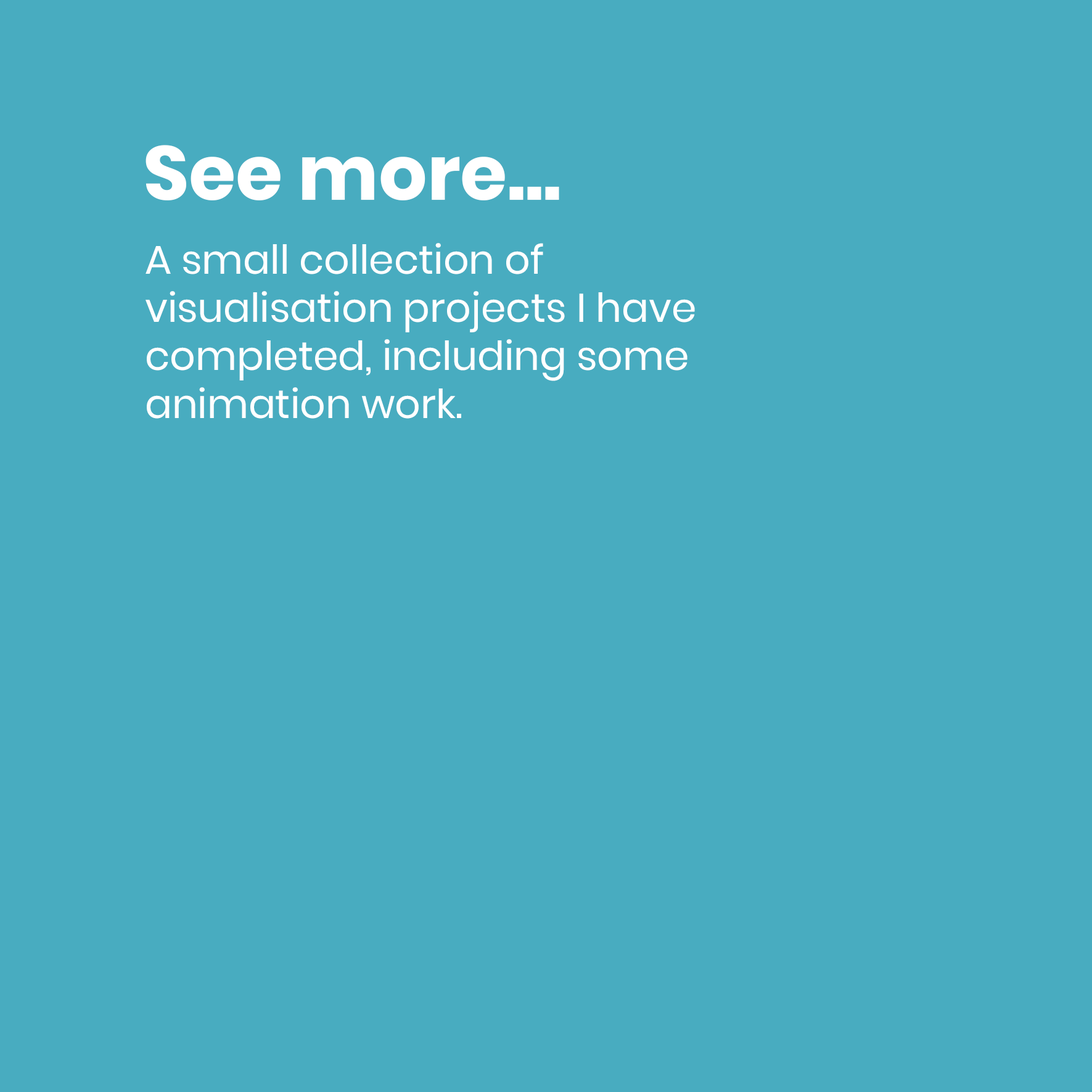
<style>
.page{position:relative;width:1092px;height:1092px;background:#48acc0}
.page>*{position:absolute;margin:0}
.t1{font:76px "Poppins-Bold";color:#ffffff}
.t2{font:40.1px "Poppins-Regular";color:#ffffff}
</style>
<div class="page">
<p class="t1" style="left:146px;top:145px;width:413px;height:55px">See more...</p>
<p class="t2" style="left:146px;top:243px;width:549px;height:176px">A small collection of<br>visualisation projects I have<br>completed, including some<br>animation work.</p>
</div>
